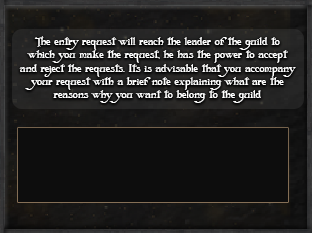
<style>
.page{position:relative;width:312px;height:233px;background:#0d0d0d}
.page>*{position:absolute;margin:0}
.t1{font:10.5px/13.1px "Folkard";color:#ffffff}
</style>
<div class="page">
<p class="t1" style="left:19px;top:36px;width:277px;height:67px;text-align:center">The entry request will reach the leader of the guild to<br>which you make the request, he has the power to accept<br>and reject the requests. Its is advisable that you accompany<br>your request with a brief note explaining what are the<br>reasons why you want to belong to the guild</p>
</div>
